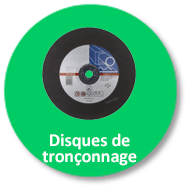
<style>
.page{position:relative;width:185px;height:185px;background:#00cc66}
.page>*{position:absolute;margin:0}
.t1{font:18px/16px "Calibri-Bold";color:#ffffff}
</style>
<div class="page">
<p class="t1" style="left:42px;top:133px;width:95px;height:33px;text-align:center">Disques de  <br>tronçonnage</p>
</div>
